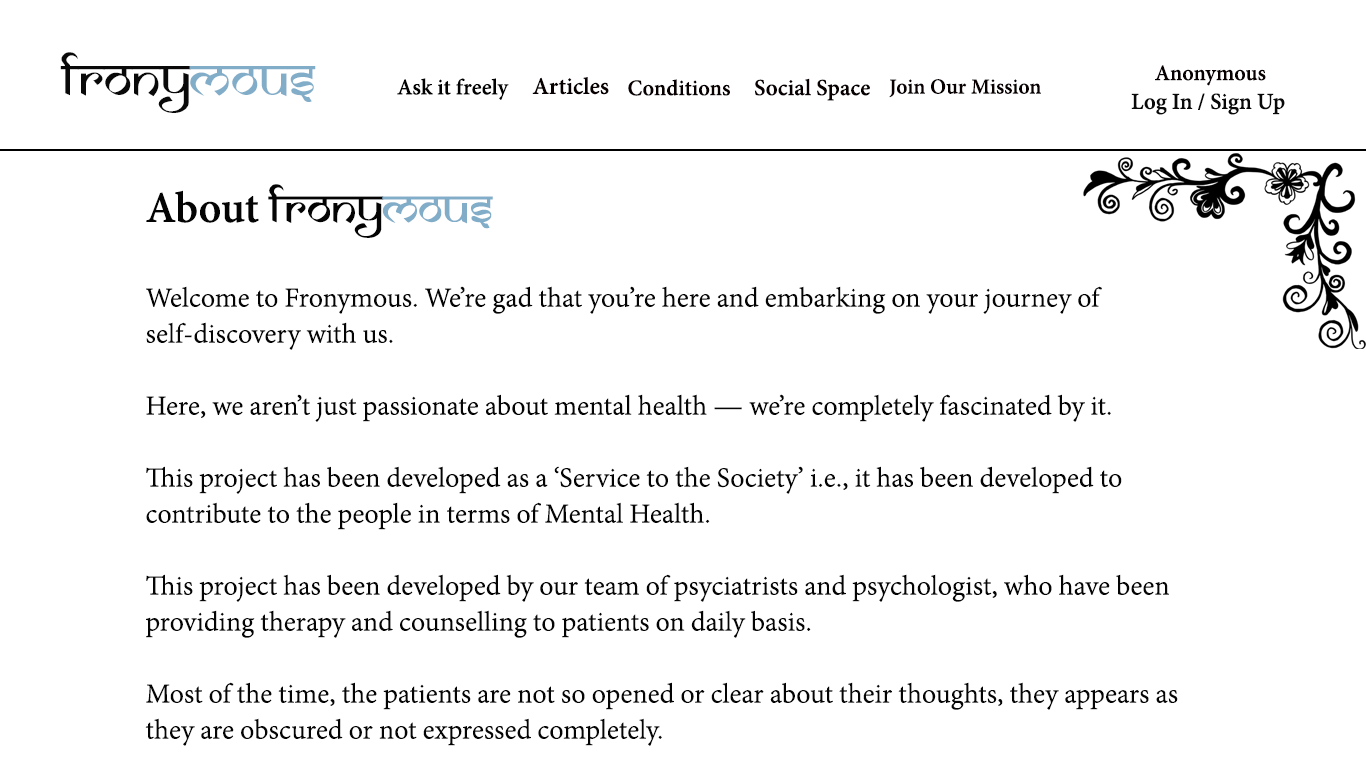
<style>
.page{position:relative;width:1366px;height:768px;background:#ffffff}
.page>*{position:absolute;margin:0}
.t1{font:54.7px "SamarkanNormal";color:#090909}
.t2{font:54.7px "SamarkanNormal";color:#82adc9}
.t3{font:24px "AdobeDevanagari-Bold";color:#080000}
.t4{font:24.5px "AdobeDevanagari-Bold";color:#020202}
.t5{font:25.8px "AdobeDevanagari-Bold";color:#080000}
.t6{font:25.1px "AdobeDevanagari-Bold";color:#080000}
.t7{font:24.3px "AdobeDevanagari-Bold";color:#080000}
.t8{font:23.4px "AdobeDevanagari-Bold";color:#080000}
.t9{font:24.9px "AdobeDevanagari-Bold";color:#090909}
.t10{font:48px "AdobeDevanagari-Bold";color:#040404}
.t11{font:48px "SamarkanNormal";color:#040404}
.t12{font:48px "SamarkanNormal";color:#82adc9}
.t13{font:30px "AdobeDevanagari-Regular";color:#040404}
</style>
<div class="page">
<p class="t1" style="left:60px;top:52px;width:256px;height:61px">frony<span class="t2">mous</span></p>
<p class="t3" style="left:1155px;top:65px;width:111px;height:21px">Anonymous</p>
<p class="t4" style="left:397px;top:78px;width:112px;height:22px">Ask it freely</p>
<p class="t5" style="left:532px;top:77px;width:77px;height:18px">Articles</p>
<p class="t6" style="left:754px;top:78px;width:116px;height:23px">Social Space</p>
<p class="t7" style="left:628px;top:79px;width:102px;height:17px">Conditions</p>
<p class="t8" style="left:889px;top:79px;width:152px;height:19px">Join Our Mission</p>
<p class="t9" style="left:1131px;top:93px;width:154px;height:22px">Log In / Sign Up</p>
<p class="t10" style="left:146px;top:184px;width:347px;height:54px">About <span class="t11">Frony</span><span class="t12">mous</span></p>
<p class="t13" style="left:145px;top:286px;width:1033px;height:460px">Welcome to Fronymous. We’re gad that you’re here and embarking on your journey of self-discovery with us. <br><br>Here, we aren’t just passionate about mental health — we’re completely fascinated by it.<br> <br>This project has been developed as a ‘Service to the Society’ i.e., it has been developed to contribute to the people in terms of Mental Health.<br><br>This project has been developed by our team of psyciatrists and psychologist, who have been providing therapy and counselling to patients on daily basis.<br><br>Most of the time, the patients are not so opened or clear about their thoughts, they appears as they are obscured or not expressed completely.</p>
</div>
